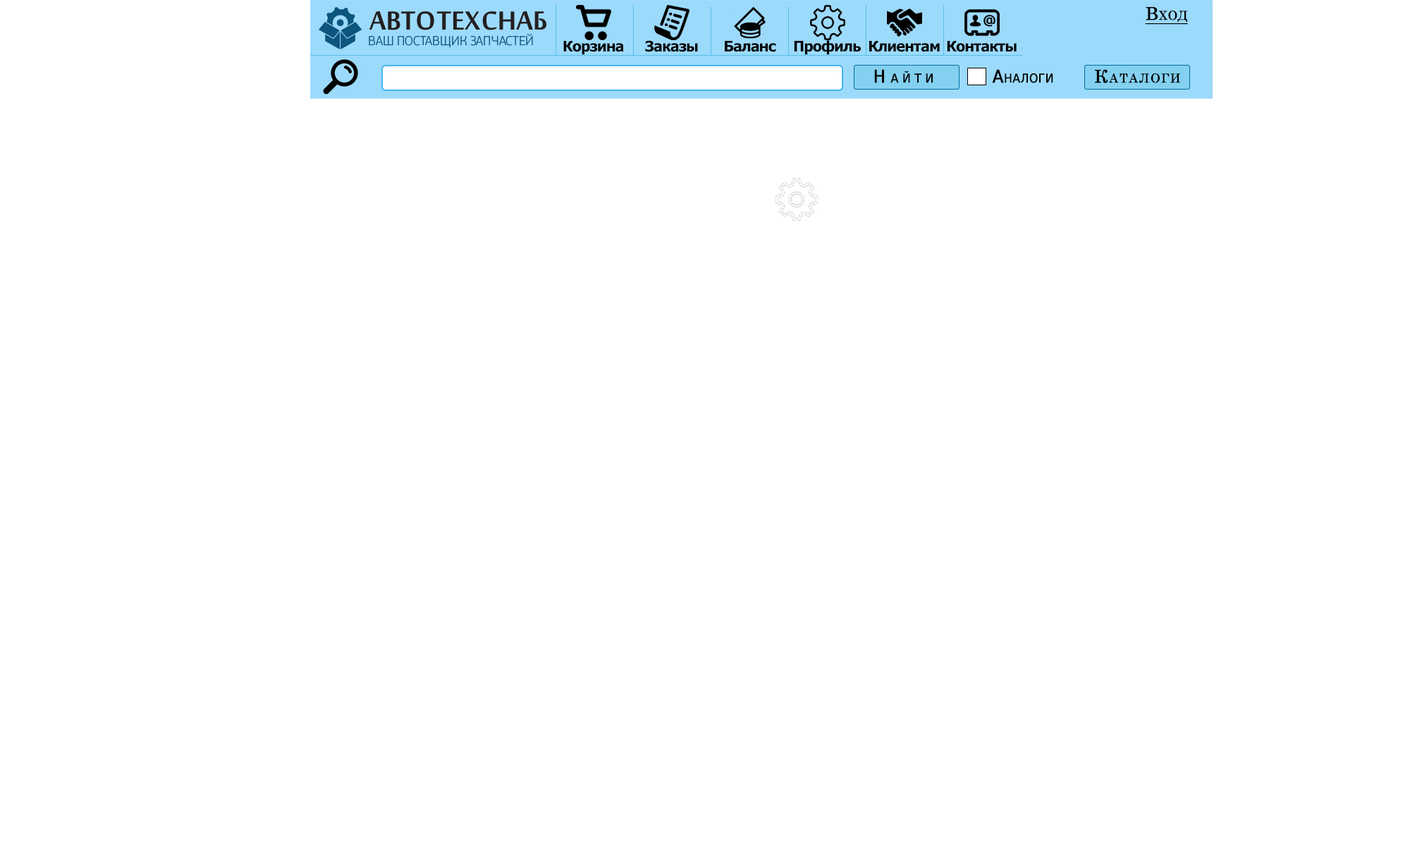
<style>
.page{position:relative;width:1410px;height:846px;background:#ffffff}
.page>*{position:absolute;margin:0}
.t1{font:17.6px "Century";color:#000000;font-variant:small-caps;font-weight:bold;text-decoration:underline}
.t2{font:14.7px "Tahoma-Bold";letter-spacing:-0.03em;color:#010101}
.t3{font:14.7px "Tahoma-Bold";letter-spacing:-0.03em;color:#000000}
.t4{font:17.6px "DejaVuSansCondensed";letter-spacing:0.29em;color:#000000;font-variant:small-caps;font-weight:bold}
.t5{font:17.6px "DejaVuSansCondensed";color:#000000;font-variant:small-caps;font-weight:bold}
.t6{font:17.6px "Century";letter-spacing:0.075em;color:#000000;font-variant:small-caps;font-weight:bold}
</style>
<div class="page">
<p class="t1" style="left:1145px;top:7px;width:43px;height:18px">Вход</p>
<p class="t2" style="left:563px;top:41px;width:60px;height:14px">Корзина</p>
<p class="t3" style="left:645px;top:40px;width:53px;height:12px">Заказы</p>
<p class="t3" style="left:725px;top:41px;width:51px;height:11px">Баланс</p>
<p class="t3" style="left:794px;top:40px;width:67px;height:15px">Профиль</p>
<p class="t3" style="left:869px;top:41px;width:71px;height:11px">Клиентам</p>
<p class="t3" style="left:947px;top:41px;width:69px;height:11px">Контакты</p>
<p class="t4" style="left:874px;top:69px;width:59px;height:14px">Найти</p>
<p class="t5" style="left:992px;top:69px;width:61px;height:14px">Аналоги</p>
<p class="t6" style="left:1095px;top:69px;width:85px;height:14px">Каталоги</p>
</div>
